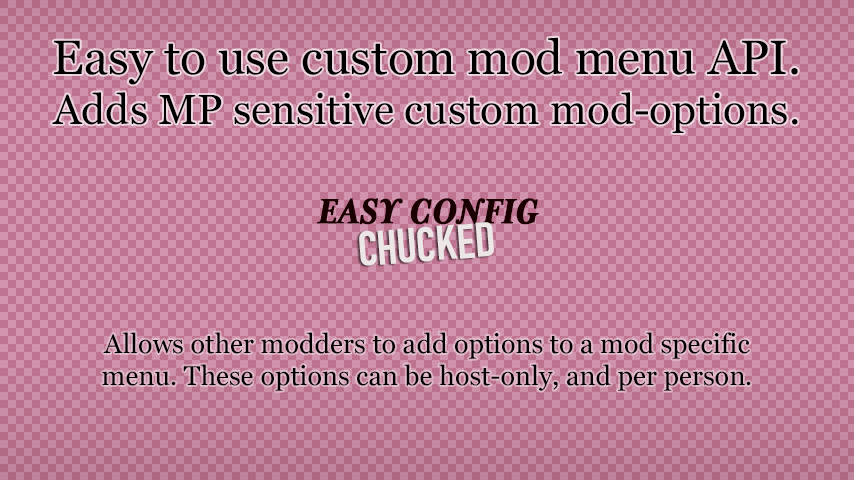
<style>
.page{position:relative;width:854px;height:480px}
.page>*{position:absolute;margin:0}
.t1{font:42px "Georgia";color:#010000}
.t2{font:48px "Georgia";color:#010000}
.t3{font:27px "Georgia";color:#000000}
</style>
<div class="page">
<p class="t1" style="left:52px;top:37px;width:746px;height:96px;text-align:center"><span class="t2">Easy to use custom mod menu API.<br></span>Adds MP sensitive custom mod-options.</p>
<p class="t3" style="left:102px;top:332px;width:649px;height:59px;text-align:center">Allows other modders to add options to a mod specific menu. These options can be host-only, and per person.</p>
</div>
